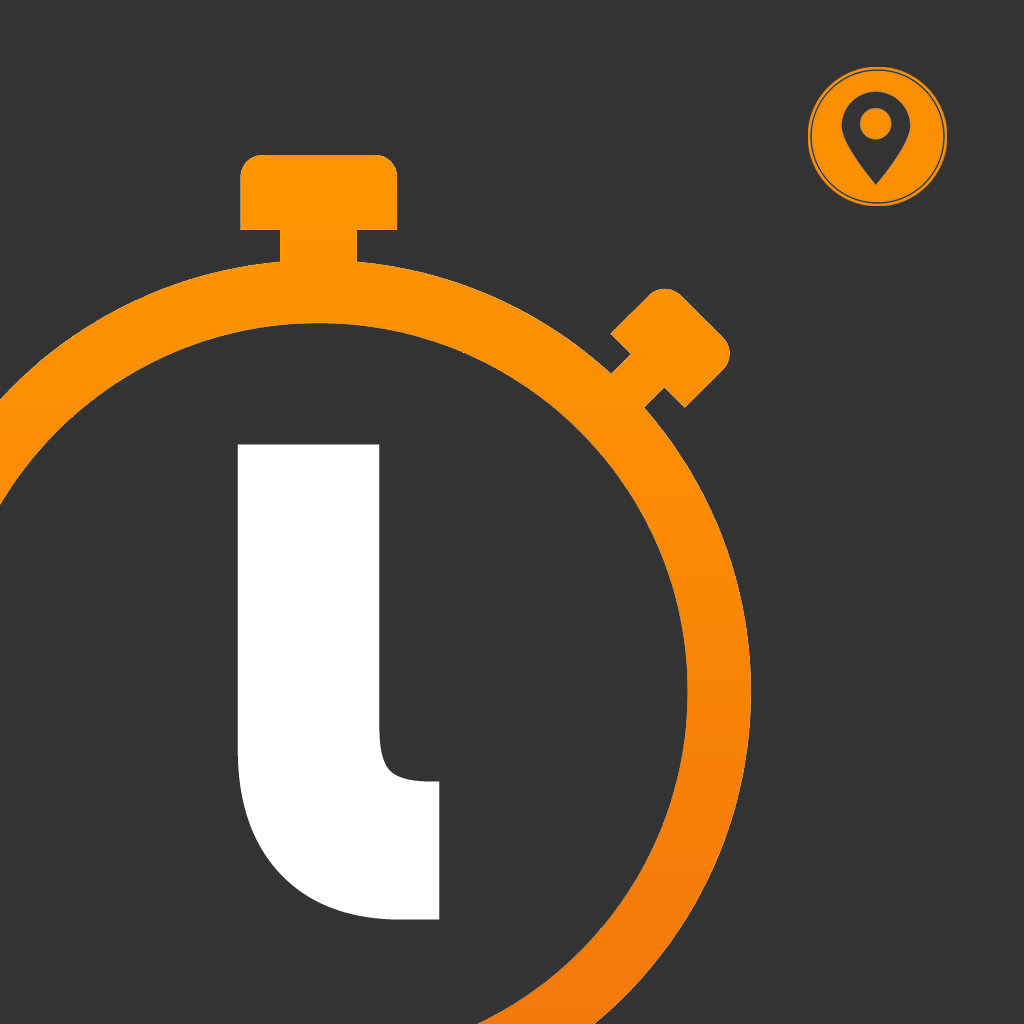
<style>
.page{position:relative;width:1024px;height:1024px;background:#333333}
.page>*{position:absolute;margin:0}
.t1{font:712.6px "Bauhaus93";color:#ffffff}
</style>
<div class="page">
<p class="t1" style="left:237px;top:444px;width:203px;height:476px">L</p>
</div>
